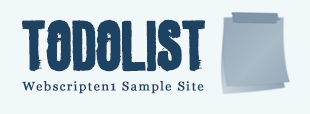
<style>
.page{position:relative;width:310px;height:114px;background:#f1f8fa}
.page>*{position:absolute;margin:0}
.t1{font:60px "golden0pony";letter-spacing:-0.025em;color:#1e4262;font-weight:bold}
.t2{font:12.2px "Georgia";letter-spacing:0.1em;color:#1e4262;font-weight:bold;scale:1.03 1}
</style>
<div class="page">
<p class="t1" style="left:22px;top:19px;width:184px;height:53px">Todolist</p>
<p class="t2" style="left:22px;top:81px;width:182px;height:13px">Webscripten1 Sample Site</p>
</div>
